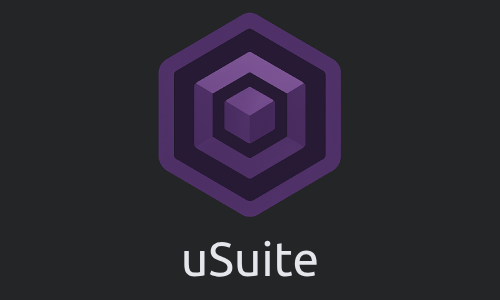
<style>
.page{position:relative;width:500px;height:300px;background:#242526}
.page>*{position:absolute;margin:0}
.t1{font:48px "Ubuntu-Regular";color:#e4e6eb}
</style>
<div class="page">
<p class="t1" style="left:184px;top:240px;width:133px;height:37px">uSuite</p>
</div>
